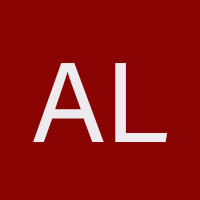
<style>
.page{position:relative;width:200px;height:200px;background:#890303}
.page>*{position:absolute;margin:0}
.t1{font:113.4px "AcuminConcept-Regular";color:#edebee;font-variant:small-caps;font-weight:bold}
</style>
<div class="page">
<p class="t1" style="left:33px;top:63px;width:134px;height:79px">AL</p>
</div>
